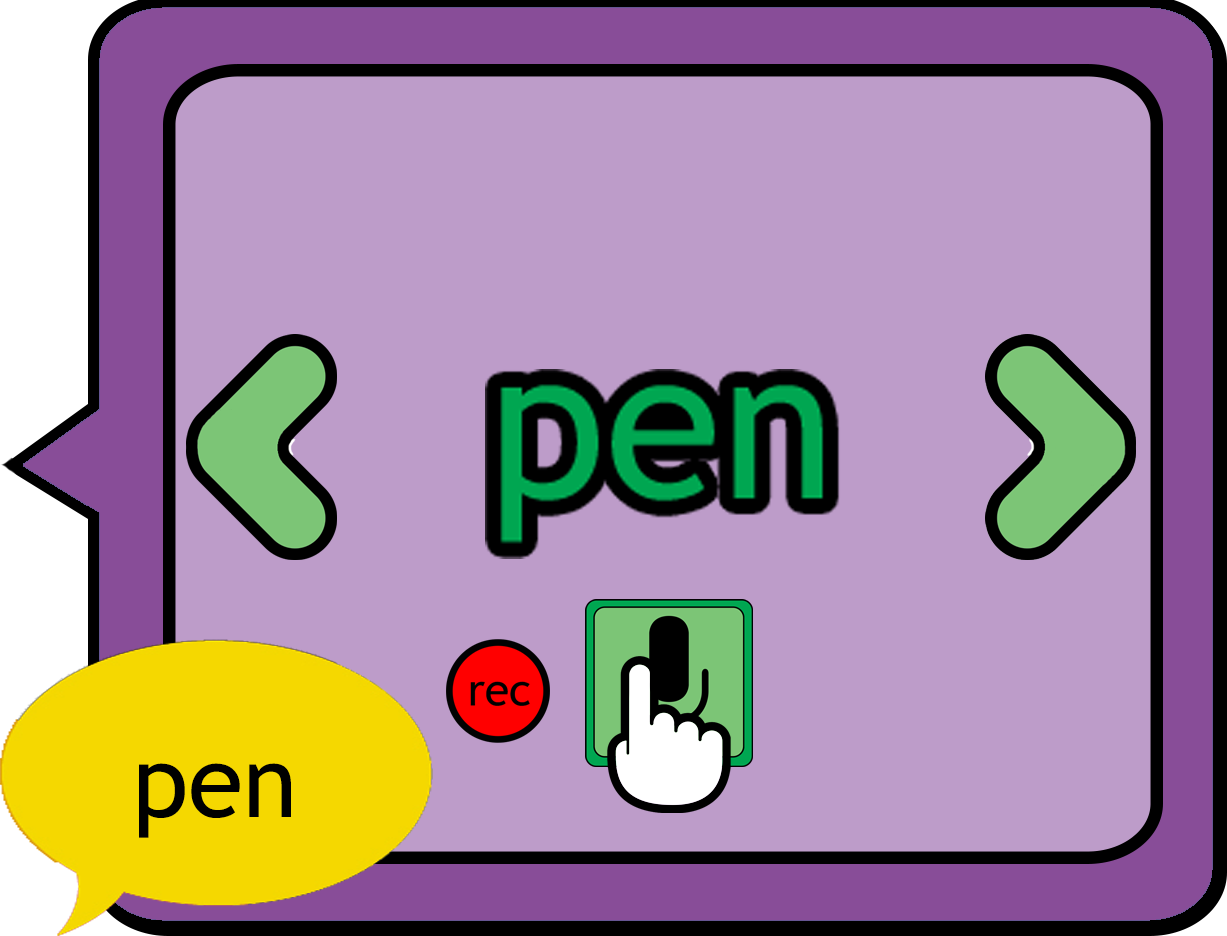
<style>
.page{position:relative;width:1227px;height:936px;background:#bd9cc9}
.page>*{position:absolute;margin:0}
.t1{font:100px "TrebuchetMS";color:#000000}
</style>
<div class="page">
<p class="t1" style="left:139px;top:763px;width:152px;height:75px">pen</p>
</div>
